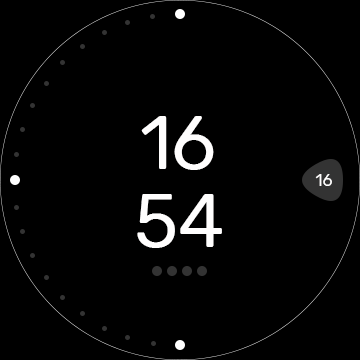
<style>
.page{position:relative;width:360px;height:360px;background:#000000}
.page>*{position:absolute;margin:0}
.t1{font:75px "Rubik-Regular";color:#fffefe}
.t2{font:16.7px "Rubik-Regular";color:#fffefe}
</style>
<div class="page">
<p class="t1" style="left:141px;top:116px;width:73px;height:54px">16</p>
<p class="t2" style="left:315px;top:174px;width:17px;height:12px">16</p>
<p class="t1" style="left:137px;top:194px;width:85px;height:54px">54</p>
</div>
